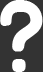
<style>
.page{position:relative;width:43px;height:72px;background:#333333}
.page>*{position:absolute;margin:0}
.t1{font:100px "HSSaemaul-Regular";color:#ffffff}
</style>
<div class="page">
<p class="t1" style="left:0px;top:0px;width:43px;height:72px">?</p>
</div>
